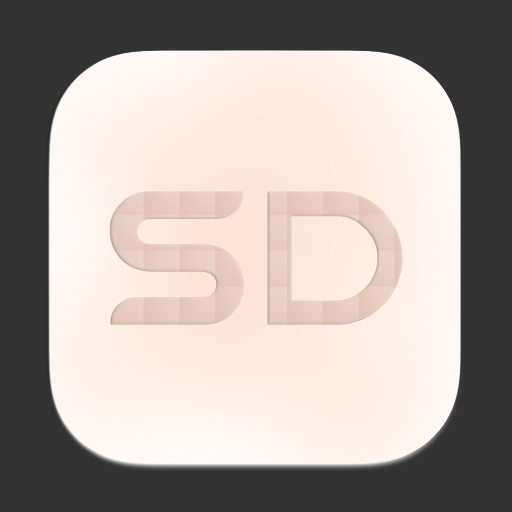
<style>
.page{position:relative;width:512px;height:512px;background:#333333}
.page>*{position:absolute;margin:0}
.t1{font:238.3px "FIFAWelcome";color:#e7cbc0}
</style>
<div class="page">
<p class="t1" style="left:109px;top:191px;width:294px;height:134px">SD</p>
</div>
